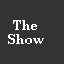
<style>
.page{position:relative;width:64px;height:64px;background:#333333}
.page>*{position:absolute;margin:0}
.t1{font:13px/14px "CenturySchoolbook-Bold";color:#ffffff}
</style>
<div class="page">
<p class="t1" style="left:8px;top:20px;width:36px;height:24px;text-align:center">The<br>Show</p>
</div>
